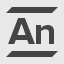
<style>
.page{position:relative;width:64px;height:64px;background:#e9e9e9}
.page>*{position:absolute;margin:0}
.t1{font:39px "ProximaNova-Bold";color:#444444}
</style>
<div class="page">
<p class="t1" style="left:8px;top:18px;width:46px;height:26px">An</p>
</div>
